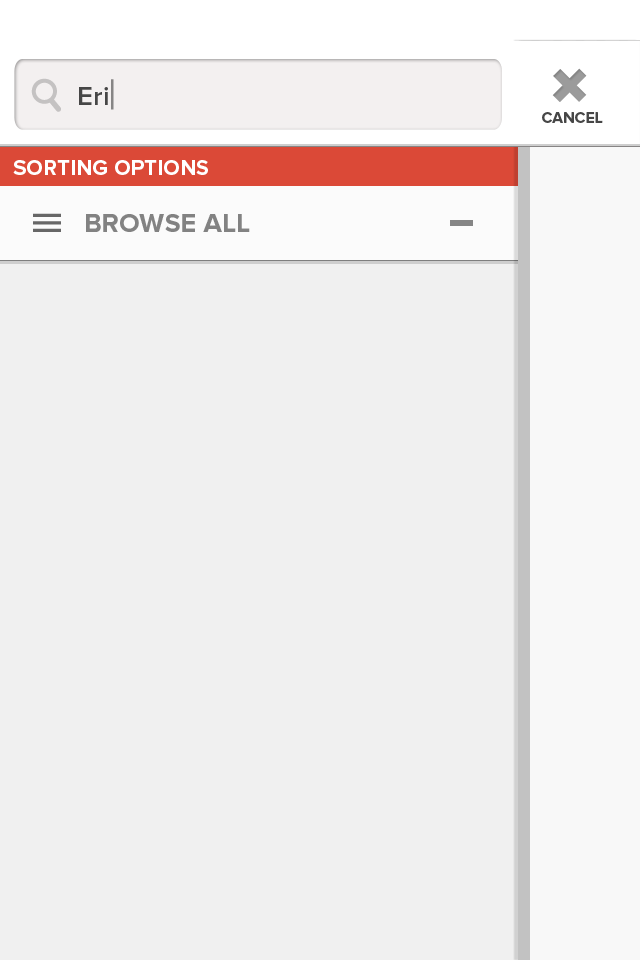
<style>
.page{position:relative;width:640px;height:960px;background:#f0f0f0}
.page>*{position:absolute;margin:0}
.t1{font:27px "ProximaNova-Semibold";letter-spacing:0.01em;color:#464646}
.t2{font:15.7px "ProximaNova-Bold";color:#464646}
.t3{font:22px "ProximaNova-Bold";color:#ffffff}
.t4{font:27px "ProximaNova-Bold";color:#828282}
</style>
<div class="page">
<p class="t1" style="left:79px;top:87px;width:29px;height:18px">Eri</p>
<p class="t2" style="left:542px;top:112px;width:61px;height:11px">CANCEL</p>
<p class="t3" style="left:13px;top:160px;width:195px;height:15px">SORTING OPTIONS</p>
<p class="t4" style="left:86px;top:214px;width:164px;height:18px">BROWSE ALL</p>
</div>
